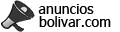
<style>
.page{position:relative;width:120px;height:32px;background:#ffffff}
.page>*{position:absolute;margin:0}
.t1{font:14px "Tahoma";letter-spacing:0.005em;color:#000000}
</style>
<div class="page">
<p class="t1" style="left:38px;top:4px;width:56px;height:10px">anuncios</p>
<p class="t1" style="left:39px;top:16px;width:72px;height:11px">bolivar.com</p>
</div>
